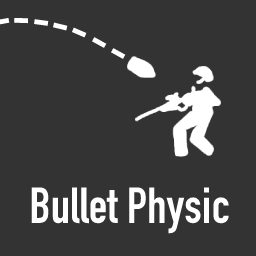
<style>
.page{position:relative;width:256px;height:256px;background:#333333}
.page>*{position:absolute;margin:0}
.t1{font:50px "DINEngschrift";color:#ffffff}
</style>
<div class="page">
<p class="t1" style="left:31px;top:187px;width:198px;height:47px">Bullet Physic</p>
</div>
